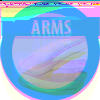
<style>
.page{position:relative;width:100px;height:100px}
.page>*{position:absolute;margin:0}
.t1{font:20.8px "MyriadPro-BoldCond";color:#aaa9fe}
</style>
<div class="page">
<p class="t1" style="left:31px;top:19px;width:40px;height:14px">ARMS</p>
</div>
